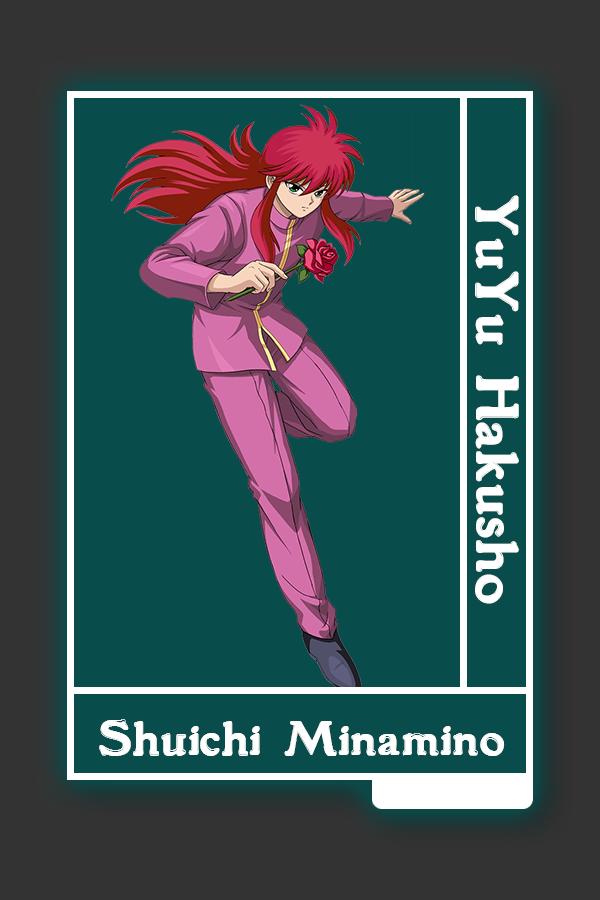
<style>
.page{position:relative;width:600px;height:900px;background:#084d4c}
.page>*{position:absolute;margin:0}
.t1{font:55.2px "GranthamOutline";color:#ffffff}
.t2{font:45.6px "GranthamOutline";color:#ffffff}
</style>
<div class="page">
<p class="t1" style="left:475px;top:195px;width:44px;height:409px;rotate:90deg">YuYu Hakusho</p>
<p class="t2" style="left:99px;top:719px;width:406px;height:37px">Shuichi Minamino</p>
</div>
